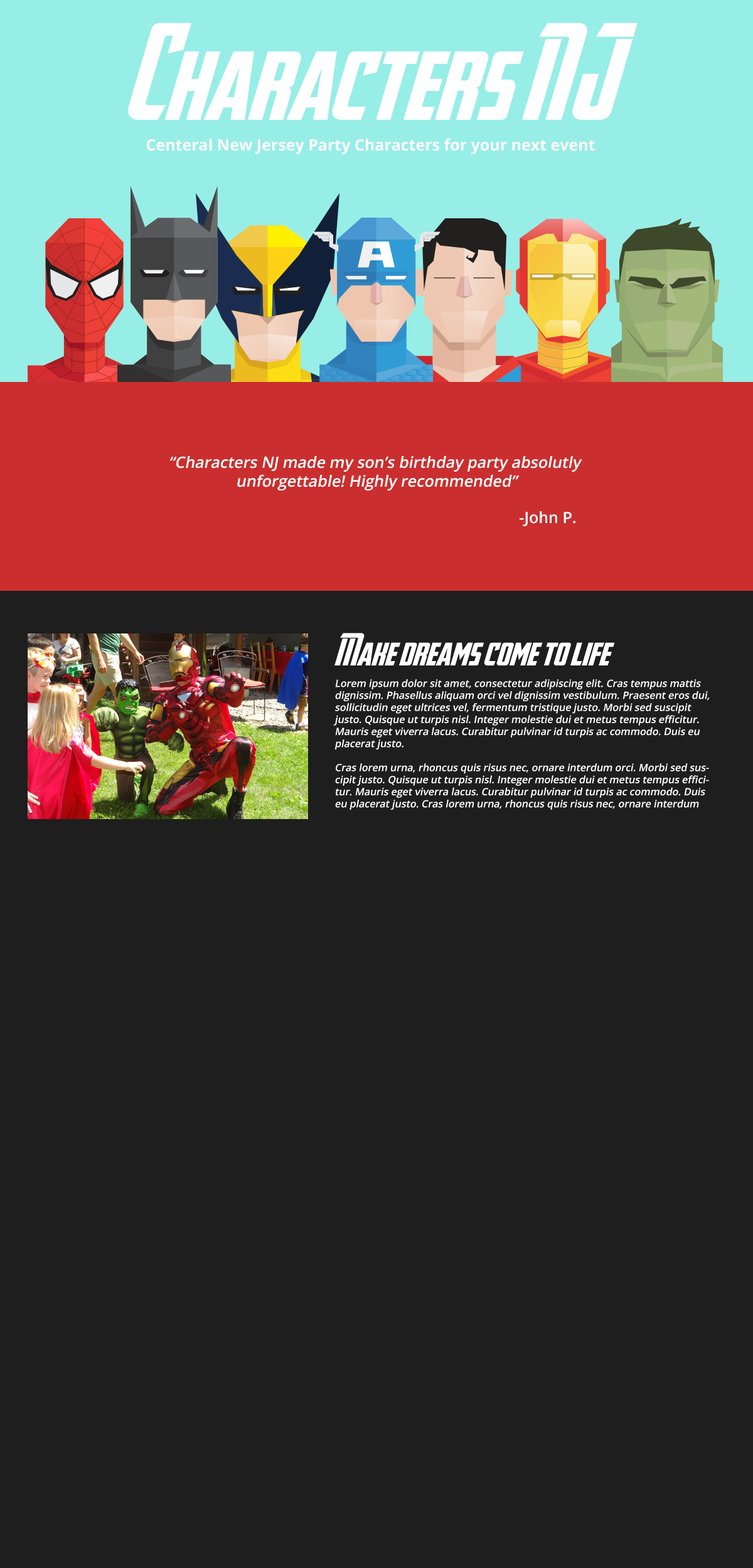
<style>
.page{position:relative;width:753px;height:1568px;background:#1e1e1e}
.page>*{position:absolute;margin:0}
.t1{font:94.1px "AvengeanceHeroicAvengerNormal";color:#ffffff}
.t2{font:15.7px "OpenSans-Bold";color:#ffffff}
.t3{font:15.7px "OpenSans-Semibold";color:#ffffff;font-style:italic}
.t4{font:15.7px "OpenSans-Semibold";color:#ffffff}
.t5{font:31.4px "AvengeanceHeroicAvengerNormal";color:#ffffff}
.t6{font:10px "OpenSans-Semibold";color:#ffffff;font-style:italic}
</style>
<div class="page">
<p class="t1" style="left:128px;top:23px;width:509px;height:97px">Characters NJ</p>
<p class="t2" style="left:147px;top:138px;width:448px;height:16px">Centeral New Jersey Party Characters for your next event</p>
<p class="t3" style="left:170px;top:456px;width:412px;height:34px;text-align:center">“Characters NJ made my son’s birthday party absolutly <br>unforgettable! Highly recommended”</p>
<p class="t4" style="left:519px;top:511px;width:56px;height:15px">-John P.</p>
<p class="t5" style="left:334px;top:633px;width:281px;height:32px">Make dreams come to life</p>
<p class="t6" style="left:333px;top:679px;width:376px;height:131px">Lorem ipsum dolor sit amet, consectetur adipiscing elit. Cras tempus mattis dignissim. Phasellus aliquam orci vel dignissim vestibulum. Praesent eros dui, sollicitudin eget ultrices vel, fermentum tristique justo. Morbi sed suscipit justo. Quisque ut turpis nisl. Integer molestie dui et metus tempus efficitur. Mauris eget viverra lacus. Curabitur pulvinar id turpis ac commodo. Duis eu placerat justo. <br><br>Cras lorem urna, rhoncus quis risus nec, ornare interdum orci. Morbi sed suscipit justo. Quisque ut turpis nisl. Integer molestie dui et metus tempus efficitur. Mauris eget viverra lacus. Curabitur pulvinar id turpis ac commodo. Duis eu placerat justo. Cras lorem urna, rhoncus quis risus nec, ornare interdum orci.</p>
</div>
